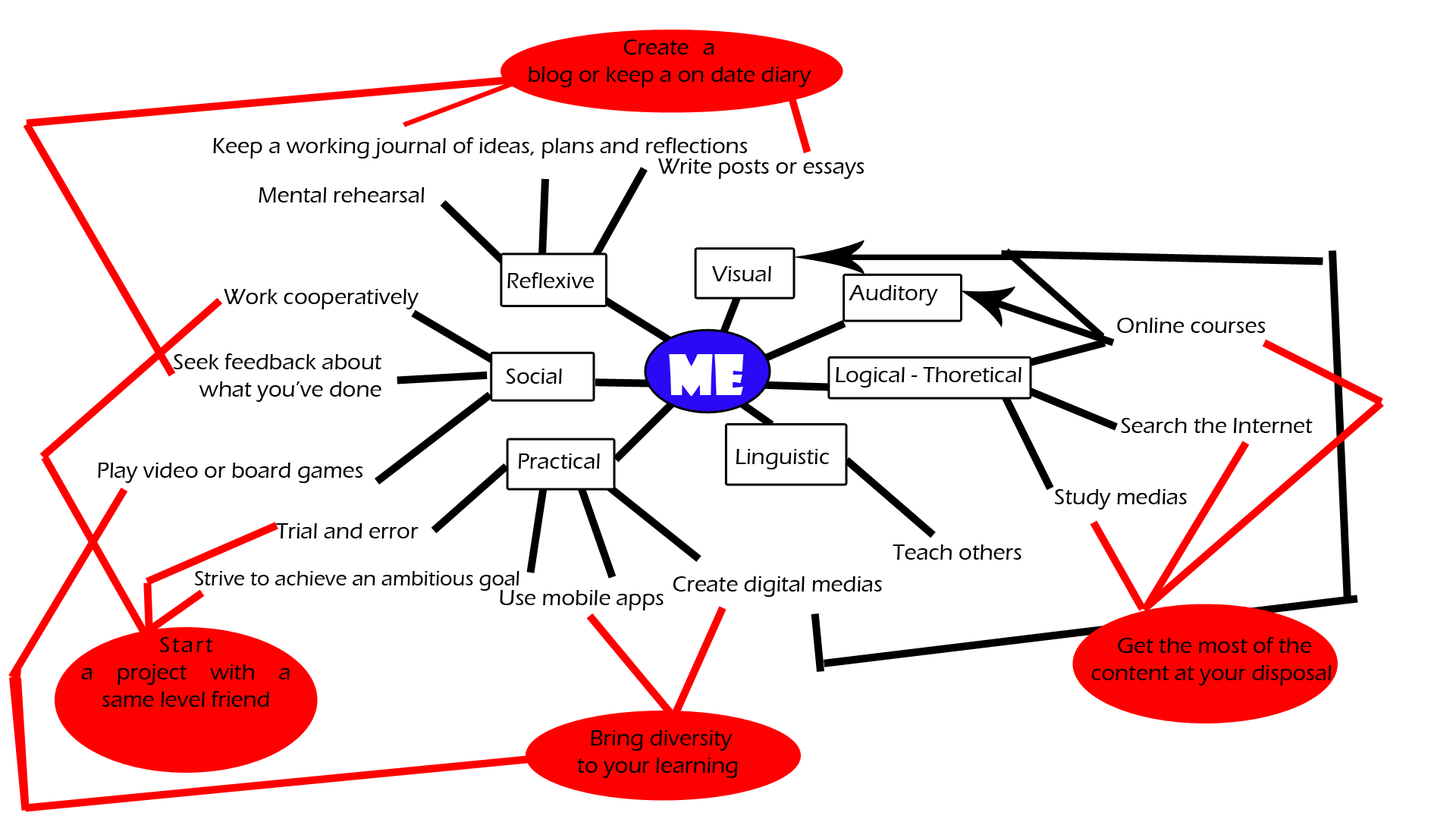
<style>
.page{position:relative;width:1456px;height:819px;background:#ffffff}
.page>*{position:absolute;margin:0}
.t1{font:22.7px "ErasITC-Medium";color:#000000}
.t2{font:22.7px "ErasITC-Medium";color:#010101}
.t3{font:53.1px "ShowcardGothic-Reg";color:#ffffff;font-weight:bold}
.t4{font:21.2px "ErasITC-Medium";color:#000000}
</style>
<div class="page">
<p class="t1" style="left:529px;top:39px;width:282px;height:48px;text-align:justify">Create a blog or keep a on date diary</p>
<p class="t1" style="left:213px;top:137px;width:535px;height:21px">Keep a working journal of ideas, plans and reflections</p>
<p class="t1" style="left:658px;top:158px;width:206px;height:21px">Write posts or essays</p>
<p class="t1" style="left:259px;top:187px;width:166px;height:15px">Mental rehearsal</p>
<p class="t2" style="left:712px;top:266px;width:59px;height:15px">Visual</p>
<p class="t2" style="left:507px;top:272px;width:87px;height:16px">Reflexive</p>
<p class="t1" style="left:224px;top:289px;width:195px;height:20px">Work cooperatively</p>
<p class="t2" style="left:849px;top:285px;width:89px;height:21px">Auditory</p>
<p class="t1" style="left:1117px;top:318px;width:149px;height:15px">Online courses</p>
<p class="t1" style="left:174px;top:353px;width:207px;height:49px;text-align:justify">Seek feedback about <br>what you’ve done</p>
<p class="t3" style="left:669px;top:354px;width:75px;height:42px">ME</p>
<p class="t2" style="left:506px;top:369px;width:56px;height:15px">Social</p>
<p class="t2" style="left:836px;top:367px;width:185px;height:21px">Logical - Thoretical</p>
<p class="t1" style="left:1121px;top:418px;width:192px;height:15px">Search the Internet</p>
<p class="t2" style="left:736px;top:449px;width:93px;height:20px">Linguistic</p>
<p class="t2" style="left:519px;top:453px;width:81px;height:16px">Practical</p>
<p class="t1" style="left:98px;top:463px;width:265px;height:20px">Play video or board games</p>
<p class="t1" style="left:1055px;top:489px;width:132px;height:21px">Study medias</p>
<p class="t1" style="left:276px;top:523px;width:143px;height:15px">Trial and error</p>
<p class="t1" style="left:893px;top:544px;width:128px;height:16px">Teach others</p>
<p class="t4" style="left:195px;top:571px;width:324px;height:20px">Strive to achieve an ambitious goal</p>
<p class="t1" style="left:673px;top:576px;width:209px;height:21px">Create digital medias</p>
<p class="t1" style="left:500px;top:590px;width:164px;height:20px">Use mobile apps</p>
<p class="t1" style="left:81px;top:637px;width:209px;height:70px;text-align:justify">Start a project with a same level friend</p>
<p class="t1" style="left:1091px;top:637px;width:241px;height:49px;text-align:center">Get the most of the <br>content at your disposal</p>
<p class="t1" style="left:577px;top:730px;width:161px;height:48px;text-align:center">Bring diversity<br> to your learning</p>
</div>
